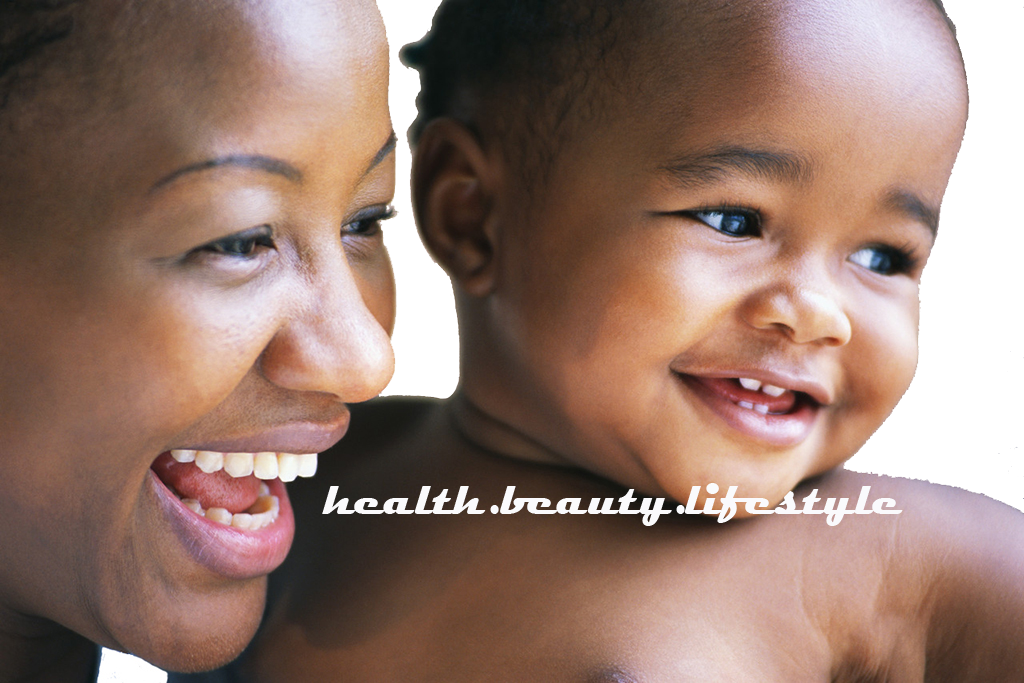
<style>
.page{position:relative;width:1024px;height:683px}
.page>*{position:absolute;margin:0}
.t1{font:48px "Magneto-Bold";color:#fafafc}
</style>
<div class="page">
<p class="t1" style="left:322px;top:483px;width:581px;height:43px">health.beauty.lifestyle</p>
</div>
